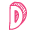
<style>
.page{position:relative;width:32px;height:32px;background:#ffffff}
.page>*{position:absolute;margin:0}
.t1{font:40px "FromCartoonBlocks";color:#ed447d}
</style>
<div class="page">
<p class="t1" style="left:9px;top:1px;width:18px;height:29px">D</p>
</div>
